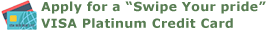
<style>
.page{position:relative;width:270px;height:30px;background:#ffffff}
.page>*{position:absolute;margin:0}
.t1{font:12.5px/16.7px "Verdana-Bold";letter-spacing:0.025em;color:#587d52}
</style>
<div class="page">
<p class="t1" style="left:41px;top:1px;width:225px;height:27px">Apply for a “Swipe Your pride”<br>VISA Platinum Credit Card</p>
</div>
